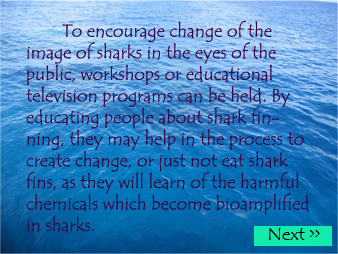
<style>
.page{position:relative;width:338px;height:254px}
.page>*{position:absolute;margin:0}
.t1{font:18px "TempusSansITC";color:#3b0746}
</style>
<div class="page">
<p class="t1" style="left:25px;top:20px;width:284px;height:213px">To encourage change of the image of sharks in the eyes of the public, workshops or educational television programs can be held. By educating people about shark finning, they may help in the process to create change, or just not eat shark fins, as they will learn of the harmful chemicals which become bioamplified in sharks.</p>
</div>
